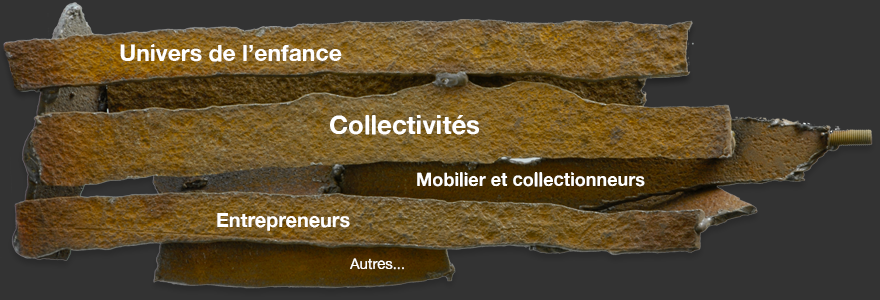
<style>
.page{position:relative;width:880px;height:300px;background:#333333}
.page>*{position:absolute;margin:0}
.t1{font:23.2px "AlteHaasGrotesk_Bold";color:#ffffff}
.t2{font:26px "AlteHaasGrotesk_Bold";color:#ffffff}
.t3{font:18.6px "AlteHaasGrotesk_Bold";color:#ffffff}
.t4{font:20.4px "AlteHaasGrotesk_Bold";color:#ffffff;scale:0.97 1}
.t5{font:14.9px "AlteHaasGrotesk";color:#ffffff}
</style>
<div class="page">
<p class="t1" style="left:120px;top:44px;width:222px;height:18px">Univers de l’enfance</p>
<p class="t2" style="left:330px;top:115px;width:149px;height:20px">Collectivités</p>
<p class="t3" style="left:417px;top:172px;width:228px;height:15px">Mobilier et collectionneurs</p>
<p class="t4" style="left:217px;top:213px;width:133px;height:18px">Entrepreneurs</p>
<p class="t5" style="left:350px;top:258px;width:54px;height:12px">Autres...</p>
</div>
